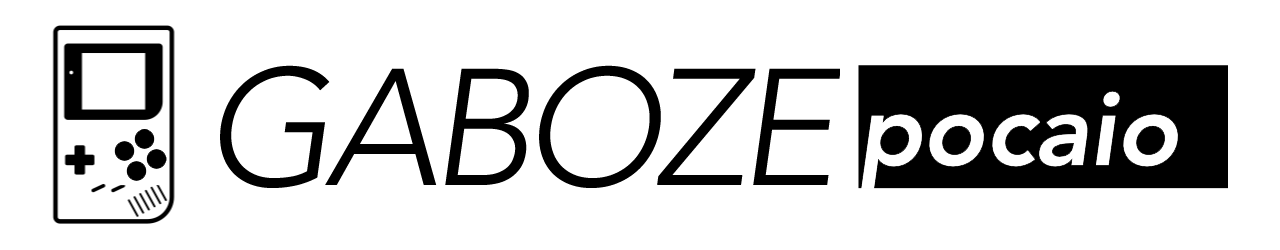
<style>
.page{position:relative;width:1280px;height:250px;background:#ffffff}
.page>*{position:absolute;margin:0}
.t1{font:164px "Avenir-LightOblique";color:#000000}
</style>
<div class="page">
<p class="t1" style="left:220px;top:65px;width:110px;height:123px">G</p>
<p class="t1" style="left:539px;top:65px;width:122px;height:123px">O</p>
<p class="t1" style="left:325px;top:68px;width:112px;height:117px">A</p>
<p class="t1" style="left:445px;top:68px;width:84px;height:117px">B</p>
<p class="t1" style="left:657px;top:68px;width:99px;height:117px">Z</p>
<p class="t1" style="left:753px;top:68px;width:88px;height:117px">E</p>
</div>
